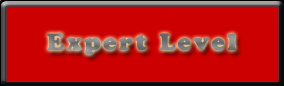
<style>
.page{position:relative;width:284px;height:86px;background:#cc0000}
.page>*{position:absolute;margin:0}
.t1{font:23.6px "CooperBlackStd";letter-spacing:0.1em;color:#7f7f7f}
</style>
<div class="page">
<p class="t1" style="left:46px;top:33px;width:191px;height:22px">Expert Level</p>
</div>
